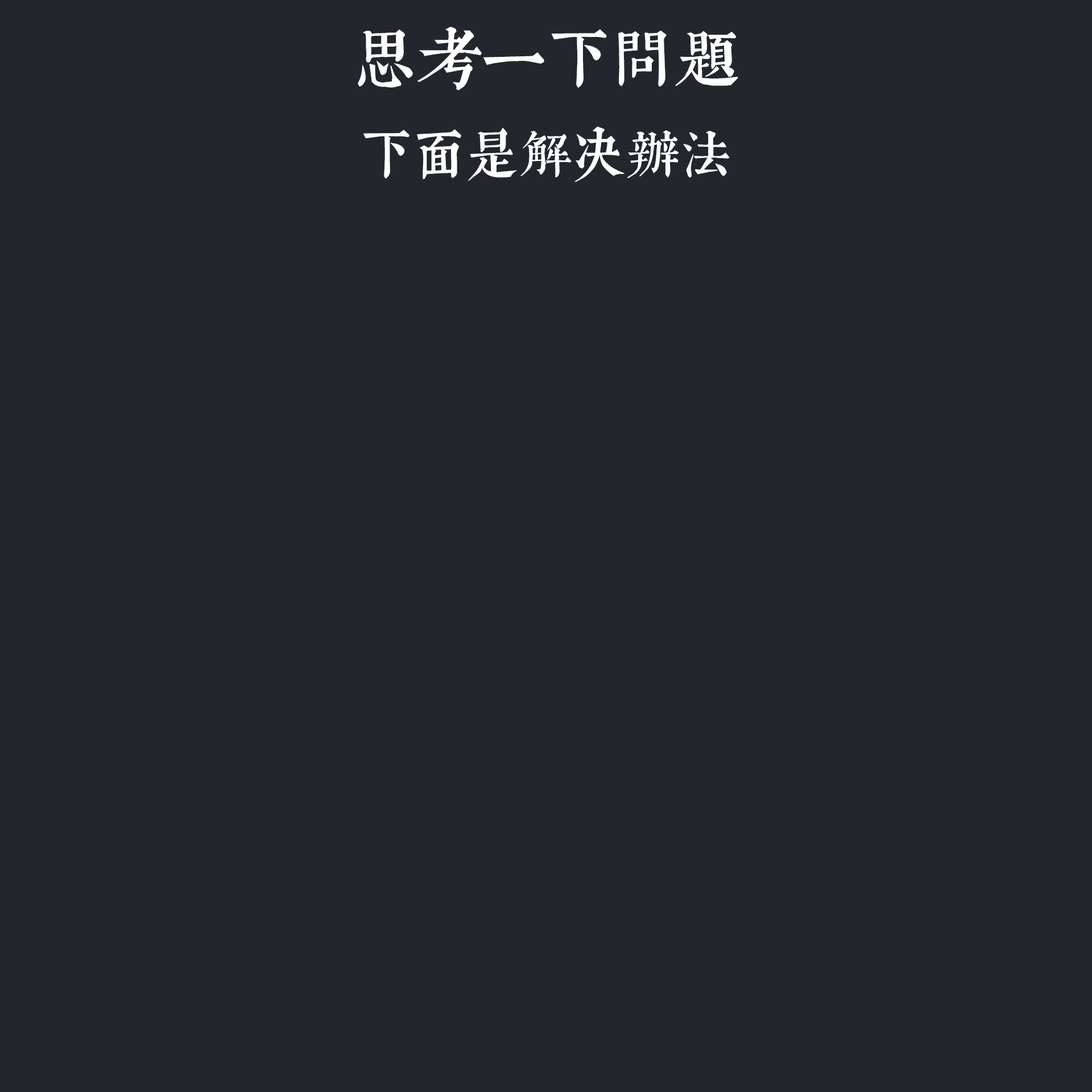
<style>
.page{position:relative;width:1092px;height:1092px;background:#23272d}
.page>*{position:absolute;margin:0}
.t1{font:53.5px/91.6px "WenYue_GuDianMingChaoTi_JRFC";color:#ffffff}
.t2{font:64.3px/91.6px "WenYue_GuDianMingChaoTi_JRFC";color:#ffffff}
</style>
<div class="page">
<p class="t1" style="left:358px;top:27px;width:380px;height:155px;text-align:center"><span class="t2">思考一下问题<br></span>下面是解决办法</p>
</div>
